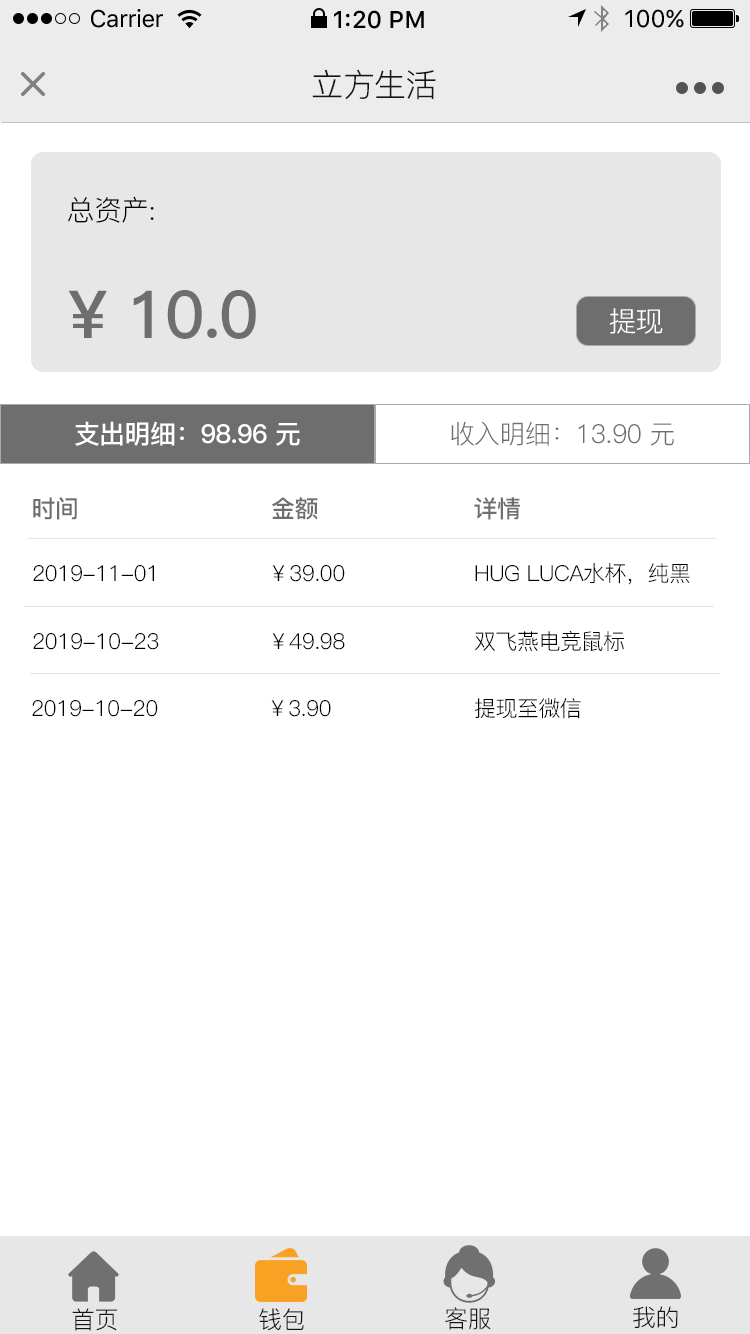
<style>
.page{position:relative;width:750px;height:1334px;background:#ffffff}
.page>*{position:absolute;margin:0}
.t1{font:24px "SFUIText-Regular";letter-spacing:-0.025em;color:#000000}
.t2{font:24px "SFUIText-Medium";color:#000000}
.t3{font:24px "SFUIText-Regular";color:#000000}
.t4{font:32.2px "PingFang-SC-Regular";letter-spacing:-0.02em;color:#141414}
.t5{font:28px "PingFang-SC-Regular";letter-spacing:-0.024em;color:#000000}
.t6{font:66px "PingFang-SC-Bold";letter-spacing:-0.024em;color:#6e6e6e}
.t7{font:28px "PingFang-SC-Regular";letter-spacing:-0.024em;color:#ffffff}
.t8{font:26px "PingFang-SC-Bold";letter-spacing:-0.024em;color:#ffffff}
.t9{font:26px "PingFang-SC-Regular";letter-spacing:-0.024em;color:#6e6e6e}
.t10{font:24px "PingFang-SC-Bold";letter-spacing:-0.024em;color:#6e6e6e}
.t11{font:22px "PingFang-SC-Regular";letter-spacing:-0.024em;color:#000000}
.t12{font:24px "PingFang-SC-Regular";letter-spacing:-0.02em;color:#141414}
</style>
<div class="page">
<p class="t1" style="left:91px;top:9px;width:72px;height:19px">Carrier</p>
<p class="t2" style="left:334px;top:10px;width:90px;height:19px">1:20 PM</p>
<p class="t3" style="left:625px;top:9px;width:59px;height:19px">100%</p>
<p class="t4" style="left:312px;top:69px;width:124px;height:31px">立方生活</p>
<p class="t5" style="left:67px;top:196px;width:87px;height:27px">总资产:</p>
<p class="t6" style="left:68px;top:290px;width:188px;height:49px">¥ 10.0</p>
<p class="t7" style="left:609px;top:308px;width:54px;height:26px">提现</p>
<p class="t8" style="left:75px;top:421px;width:225px;height:25px">支出明细：98.96 元</p>
<p class="t9" style="left:451px;top:421px;width:223px;height:25px">收入明细：13.90 元</p>
<p class="t10" style="left:33px;top:497px;width:487px;height:23px">时间                          金额                     详情</p>
<p class="t11" style="left:33px;top:563px;width:657px;height:22px">2019-11-01                ￥39.00                   HUG LUCA水杯，纯黑</p>
<p class="t11" style="left:33px;top:630px;width:591px;height:22px">2019-10-23                ￥49.98                   双飞燕电竞鼠标</p>
<p class="t11" style="left:32px;top:698px;width:549px;height:21px">2019-10-20                ￥3.90                     提现至微信</p>
<p class="t12" style="left:72px;top:1308px;width:45px;height:23px">首页</p>
<p class="t12" style="left:259px;top:1308px;width:45px;height:23px">钱包</p>
<p class="t12" style="left:445px;top:1307px;width:46px;height:23px">客服</p>
<p class="t12" style="left:633px;top:1306px;width:45px;height:22px">我的</p>
</div>
